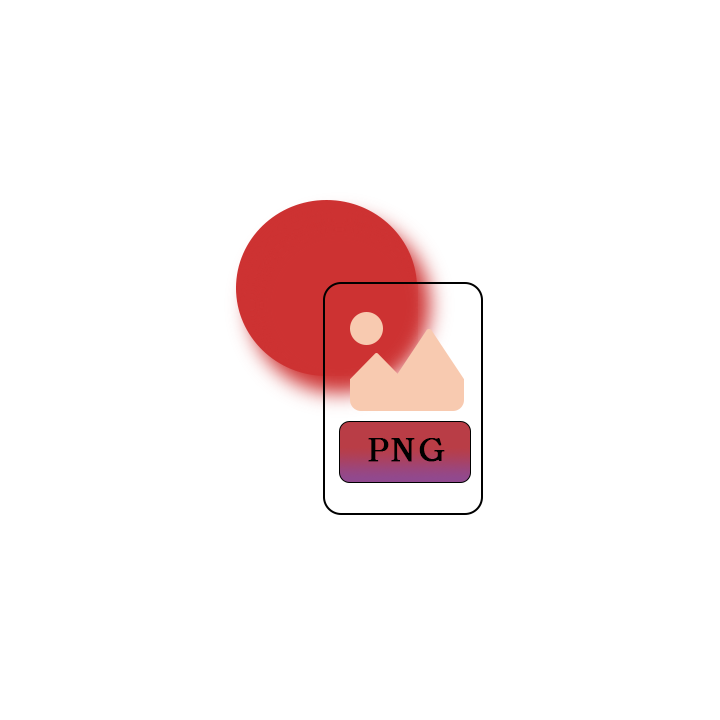
<style>
.page{position:relative;width:720px;height:720px;background:#ffffff}
.page>*{position:absolute;margin:0}
.t1{font:33.3px "STZhongsong";letter-spacing:0.06em;color:#000000;font-weight:bold}
</style>
<div class="page">
<p class="t1" style="left:368px;top:438px;width:77px;height:24px">PNG</p>
</div>
